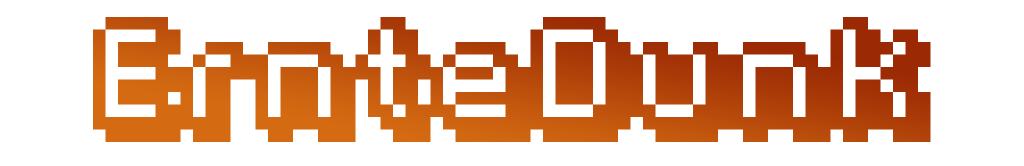
<style>
.page{position:relative;width:1024px;height:166px;background:#ffffff}
.page>*{position:absolute;margin:0}
.t1{font:100px "Fipps-Regular"}
</style>
<div class="page">
<p class="t1" style="left:93px;top:17px;width:838px;height:125px">ErnteDunk</p>
</div>
